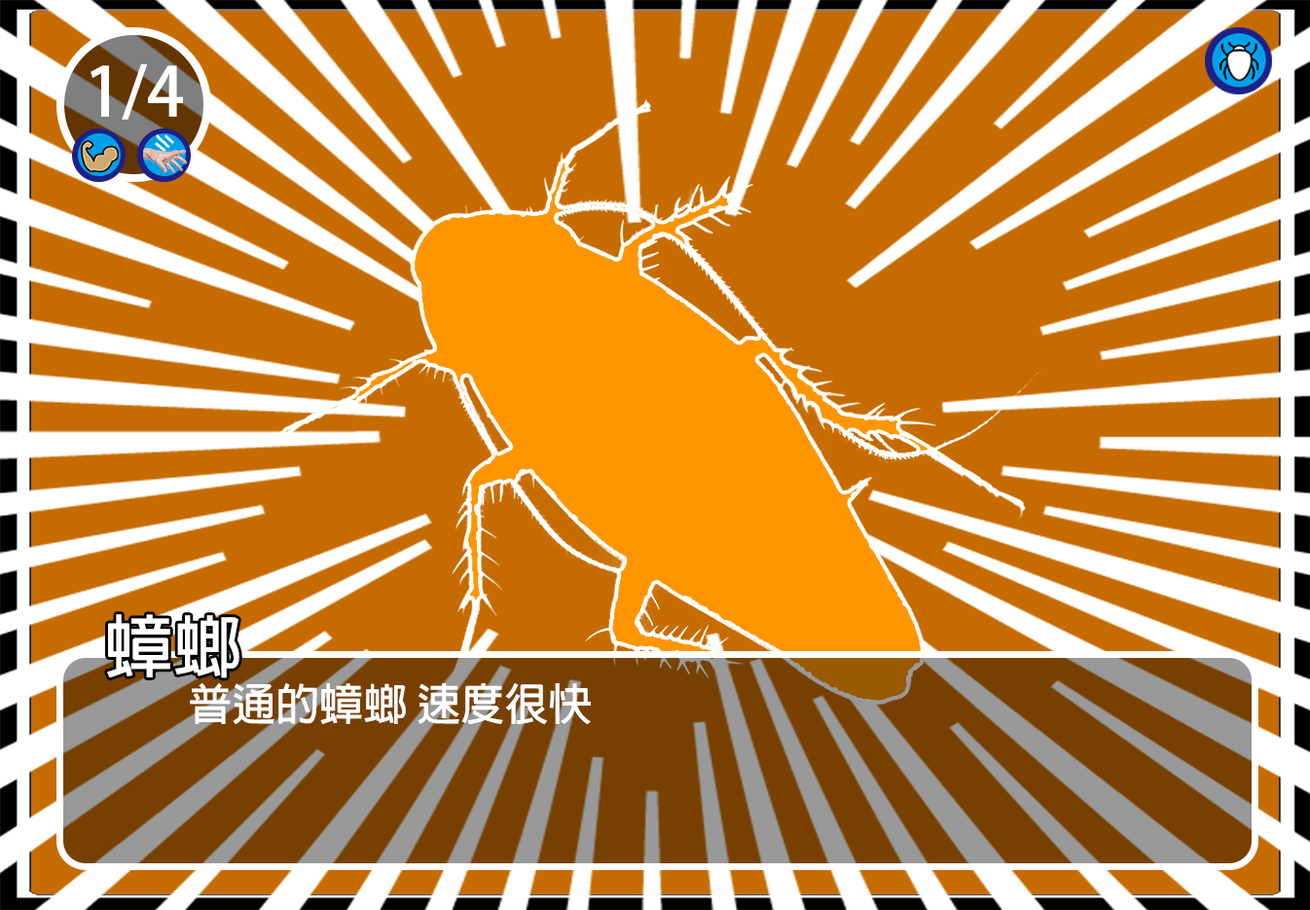
<style>
.page{position:relative;width:1310px;height:910px;background:#c66b00}
.page>*{position:absolute;margin:0}
.t1{font:66.9px "AdobeFanHeitiStd-Bold";color:#ffffff}
.t2{font:68.1px "AdobeFanHeitiStd-Bold";color:#ffffff}
.t3{font:43.8px "AdobeFanHeitiStd-Bold";color:#ffffff}
</style>
<div class="page">
<p class="t1" style="left:91px;top:64px;width:92px;height:56px">1/4</p>
<p class="t2" style="left:107px;top:614px;width:132px;height:64px">蟑螂</p>
<p class="t3" style="left:190px;top:683px;width:401px;height:42px">普通的蟑螂 速度很快</p>
</div>
